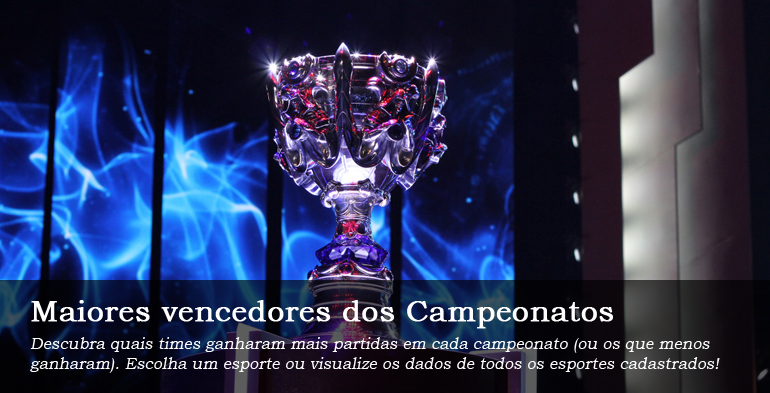
<style>
.page{position:relative;width:770px;height:393px}
.page>*{position:absolute;margin:0}
.t1{font:30px "BookmanOldStyle";color:#fefefe;font-weight:bold}
.t2{font:16px "BookmanOldStyle";color:#fefefe;font-style:italic}
</style>
<div class="page">
<p class="t1" style="left:31px;top:300px;width:582px;height:29px">Maiores vencedores dos Campeonatos</p>
<p class="t2" style="left:30px;top:337px;width:690px;height:36px">Descubra quais times ganharam mais partidas em cada campeonato (ou os que menos ganharam). Escolha um esporte ou visualize os dados de todos os esportes cadastrados!</p>
</div>
